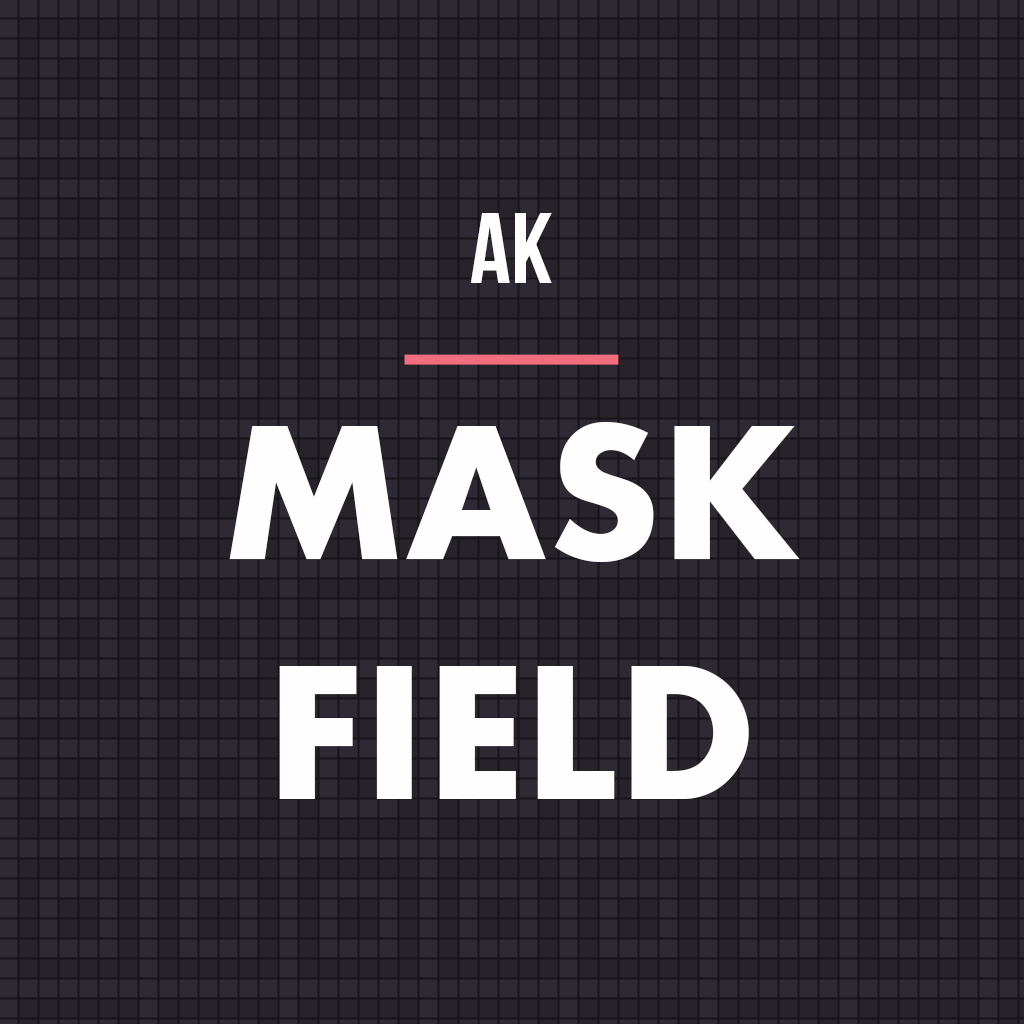
<style>
.page{position:relative;width:1024px;height:1024px;background:#2f2933}
.page>*{position:absolute;margin:0}
.t1{font:100.1px "BebasNeue";color:#fefefe;text-transform:uppercase}
.t2{font:200.2px "Aharoni-Bold";color:#fefefe;text-transform:uppercase}
</style>
<div class="page">
<p class="t1" style="left:471px;top:213px;width:81px;height:70px">ak</p>
<p class="t2" style="left:229px;top:422px;width:571px;height:377px;text-align:center">Mask<br>field</p>
</div>
